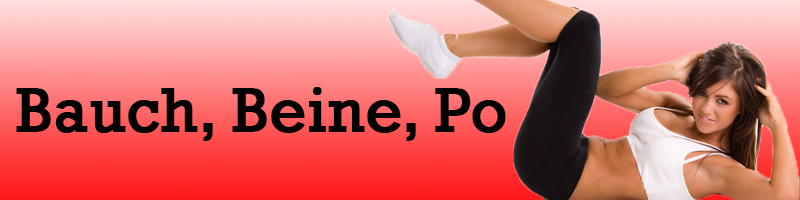
<style>
.page{position:relative;width:800px;height:200px}
.page>*{position:absolute;margin:0}
.t1{font:63px "Rockwell";color:#000000;font-weight:bold}
</style>
<div class="page">
<p class="t1" style="left:16px;top:87px;width:490px;height:54px">Bauch, Beine, Po</p>
</div>
